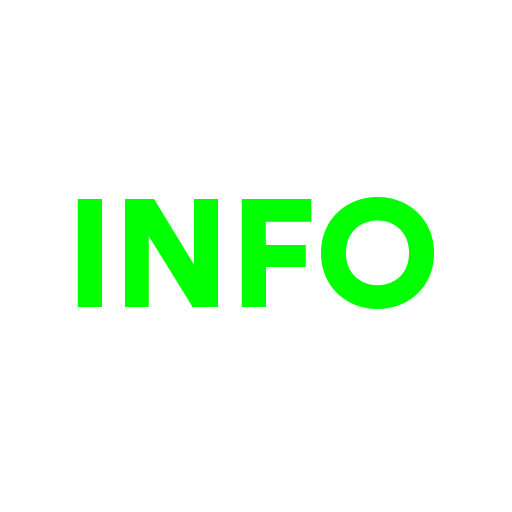
<style>
.page{position:relative;width:512px;height:512px;background:#ffffff}
.page>*{position:absolute;margin:0}
.t1{font:152px "CircularStd-Black";color:#00ff00}
</style>
<div class="page">
<p class="t1" style="left:77px;top:196px;width:357px;height:114px">INFO</p>
</div>
